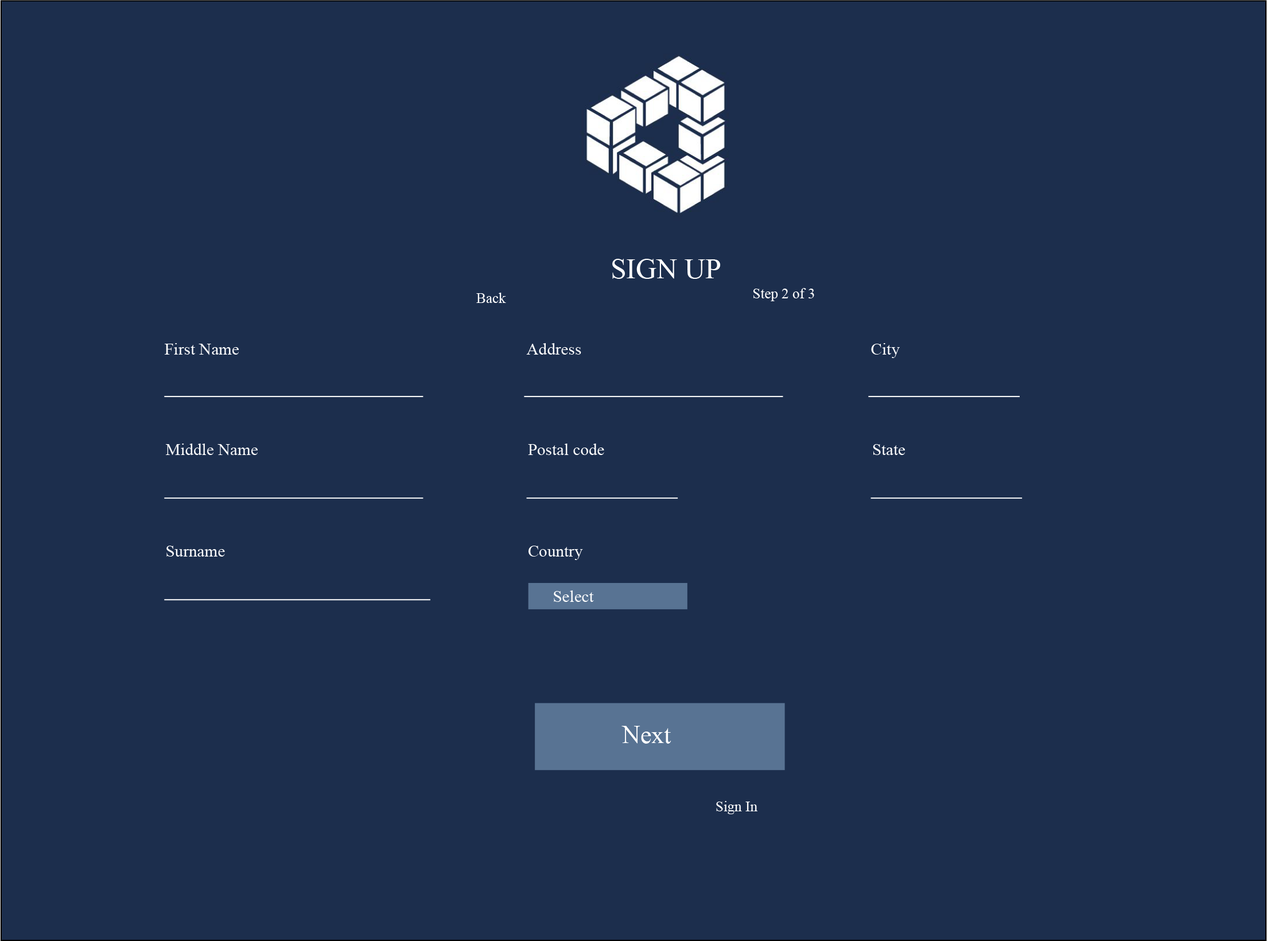
<style>
.page{position:relative;width:1267px;height:941px;background:#1c2e4d}
.page>*{position:absolute;margin:0}
.t1{font:28.7px "MyriadPro-Regular";color:#ffffff}
.t2{font:14.3px "MyriadPro-Regular";color:#ffffff}
.t3{font:16.7px "MyriadPro-Regular";color:#ffffff}
.t4{font:25.1px "MyriadPro-Regular";color:#ffffff}
</style>
<div class="page">
<p class="t1" style="left:612px;top:259px;width:109px;height:20px">SIGN UP</p>
<p class="t2" style="left:476px;top:293px;width:30px;height:10px">Back</p>
<p class="t2" style="left:753px;top:288px;width:61px;height:13px">Step 2 of 3</p>
<p class="t3" style="left:165px;top:343px;width:74px;height:12px">First Name</p>
<p class="t3" style="left:526px;top:343px;width:55px;height:12px">Address</p>
<p class="t3" style="left:871px;top:343px;width:29px;height:15px">City</p>
<p class="t3" style="left:166px;top:444px;width:92px;height:12px">Middle Name</p>
<p class="t3" style="left:528px;top:444px;width:76px;height:11px">Postal code</p>
<p class="t3" style="left:873px;top:444px;width:32px;height:11px">State</p>
<p class="t3" style="left:166px;top:546px;width:59px;height:11px">Surname</p>
<p class="t3" style="left:529px;top:546px;width:54px;height:14px">Country</p>
<p class="t3" style="left:554px;top:590px;width:40px;height:12px">Select</p>
<p class="t4" style="left:621px;top:726px;width:50px;height:18px">Next</p>
<p class="t2" style="left:716px;top:801px;width:41px;height:13px">Sign In</p>
</div>
